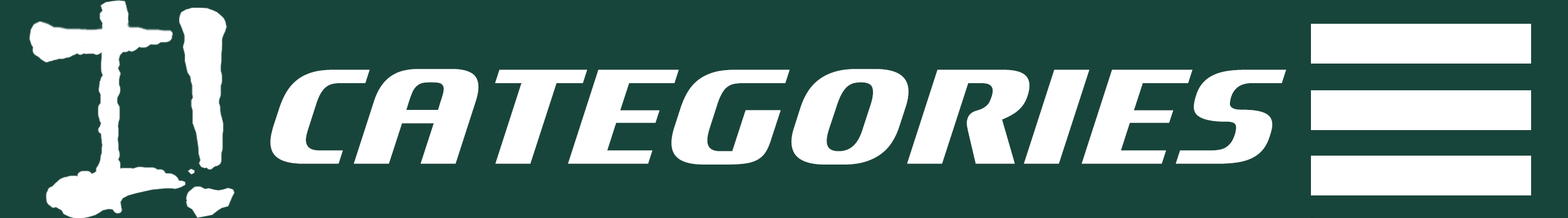
<style>
.page{position:relative;width:1568px;height:218px;background:#18453b}
.page>*{position:absolute;margin:0}
.t1{font:212.4px "Motorwerk";color:#ffffff}
</style>
<div class="page">
<p class="t1" style="left:270px;top:69px;width:1017px;height:96px">Categories</p>
</div>
